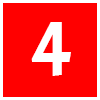
<style>
.page{position:relative;width:100px;height:100px;background:#ff0000}
.page>*{position:absolute;margin:0}
.t1{font:72px "ELEGANCE";color:#ffffff}
</style>
<div class="page">
<p class="t1" style="left:31px;top:22px;width:40px;height:54px">4</p>
</div>
